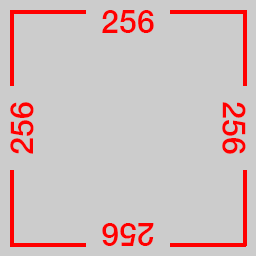
<style>
.page{position:relative;width:256px;height:256px;background:#cccccc}
.page>*{position:absolute;margin:0}
.t1{font:32px "HelveticaNeueLT-Medium";color:#ff0000}
.t2{font:31.8px "HelveticaNeueLT-Medium";color:#ff0000}
</style>
<div class="page">
<p class="t1" style="left:102px;top:10px;width:52px;height:23px">256</p>
<p class="t2" style="left:10px;top:102px;width:24px;height:52px;rotate:-90deg">256</p>
<p class="t1" style="left:222px;top:102px;width:24px;height:52px;rotate:90deg">256</p>
<p class="t2" style="left:102px;top:223px;width:52px;height:23px;rotate:180deg">256</p>
</div>
